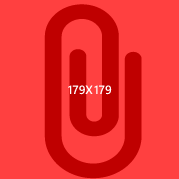
<style>
.page{position:relative;width:179px;height:179px;background:#ff4040}
.page>*{position:absolute;margin:0}
.t1{font:12px "SegoeWP-Semibold";letter-spacing:0.025em;color:#ffffff;text-transform:uppercase}
</style>
<div class="page">
<p class="t1" style="left:68px;top:85px;width:44px;height:10px">179x179</p>
</div>
